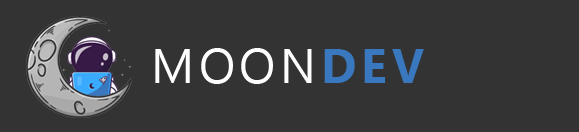
<style>
.page{position:relative;width:579px;height:132px;background:#333333}
.page>*{position:absolute;margin:0}
.t1{font:48px "Ebrima";letter-spacing:0.1em;color:#fffefe}
.t2{font:48px "Ebrima-Bold";letter-spacing:0.1em;color:#3978bf}
</style>
<div class="page">
<p class="t1" style="left:155px;top:48px;width:157px;height:36px">MOON</p>
<p class="t2" style="left:324px;top:49px;width:100px;height:34px">DEV</p>
</div>
